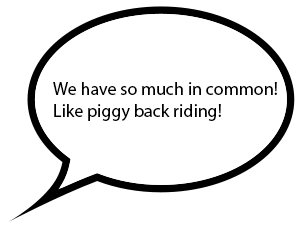
<style>
.page{position:relative;width:300px;height:226px;background:#ffffff}
.page>*{position:absolute;margin:0}
.t1{font:18px "MyriadPro-Regular";color:#000000}
</style>
<div class="page">
<p class="t1" style="left:53px;top:82px;width:224px;height:39px">We have so much in common! <br>Like piggy back riding!</p>
</div>
